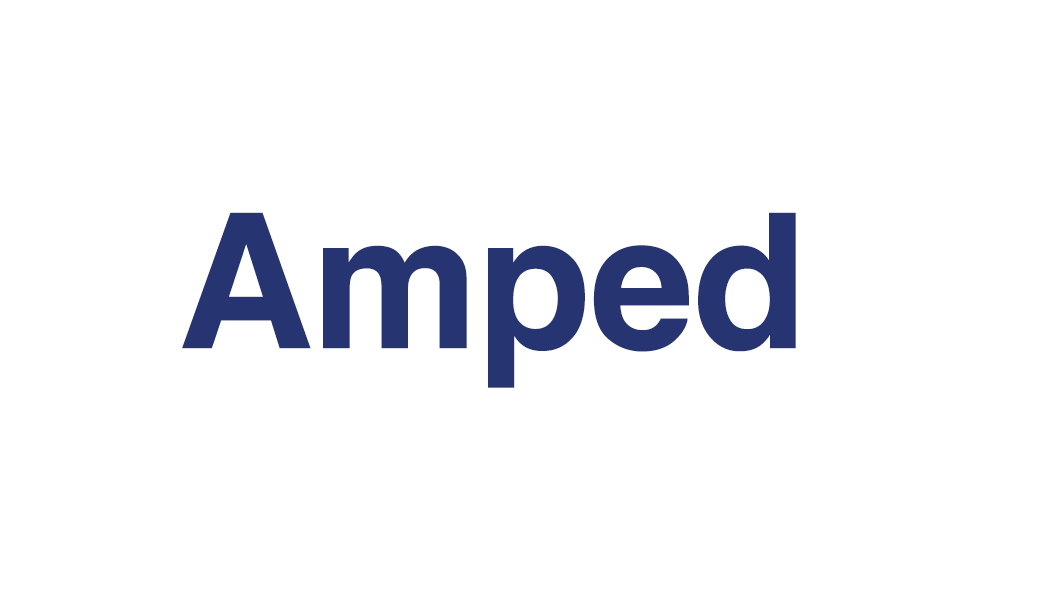
<style>
.page{position:relative;width:1050px;height:600px;background:#ffffff}
.page>*{position:absolute;margin:0}
.t1{font:188px "Helvetica-Bold";letter-spacing:-0.01em;color:#263571}
</style>
<div class="page">
<p class="t1" style="left:182px;top:212px;width:614px;height:176px">Amped</p>
</div>
